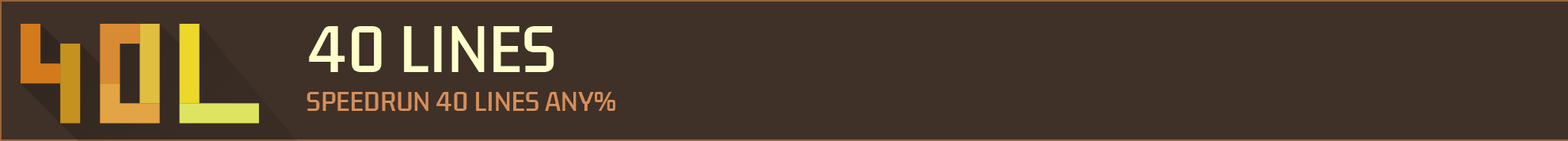
<style>
.page{position:relative;width:1568px;height:141px;background:#3f3128}
.page>*{position:absolute;margin:0}
.t1{font:57px "KdamThmorPro-Regular";color:#ffffcc}
.t2{font:23.8px "KdamThmorPro-Regular";color:#d68f5b}
</style>
<div class="page">
<p class="t1" style="left:309px;top:26px;width:245px;height:46px">40 LINES</p>
<p class="t2" style="left:306px;top:92px;width:309px;height:19px">SPEEDRUN 40 LINES ANY%</p>
</div>
